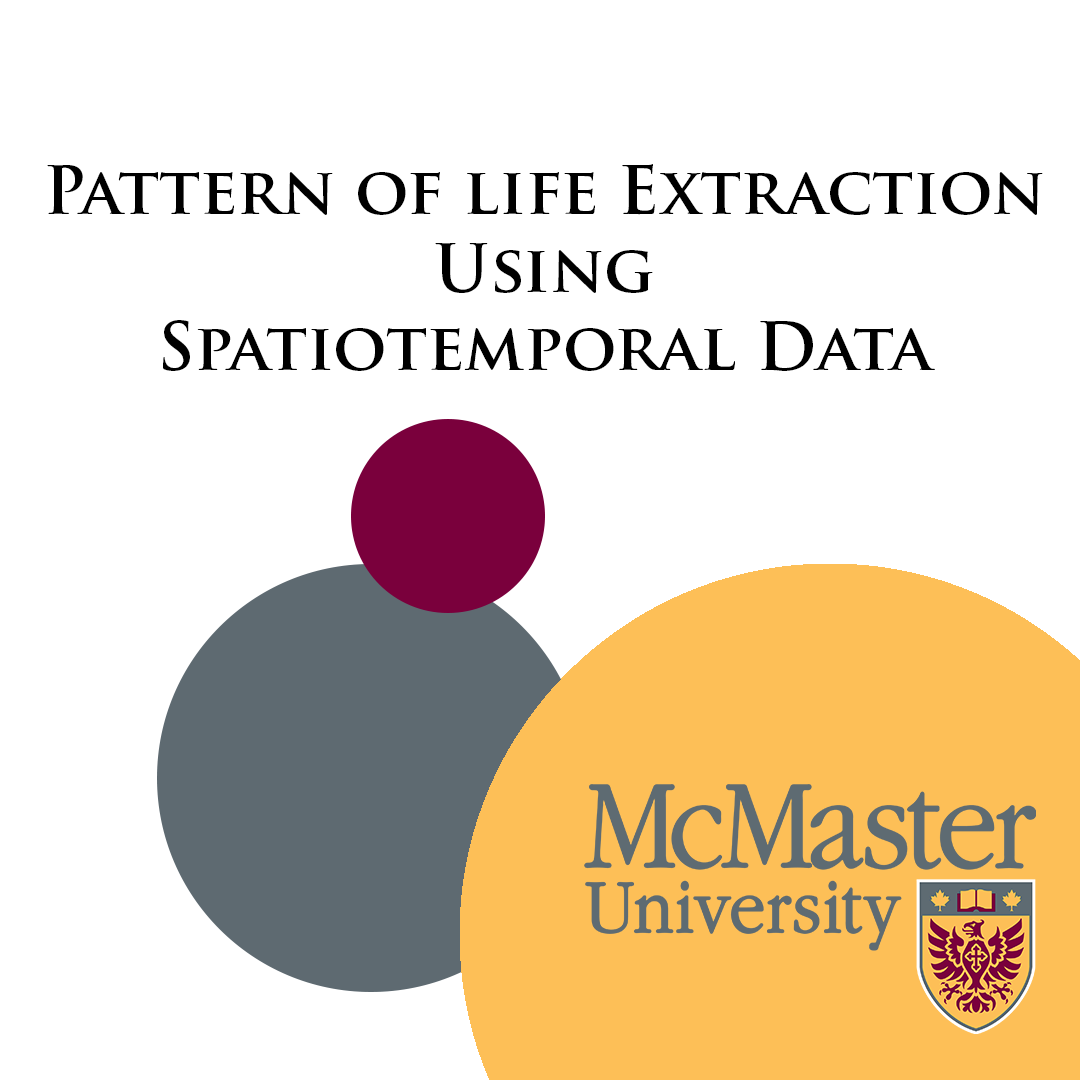
<style>
.page{position:relative;width:1080px;height:1080px;background:#ffffff}
.page>*{position:absolute;margin:0}
.t1{font:65px "TrajanPro-Bold";color:#000000}
</style>
<div class="page">
<p class="t1" style="left:47px;top:164px;width:996px;height:207px;text-align:center">Pattern of life Extraction<br>Using<br>Spatiotemporal Data</p>
</div>
